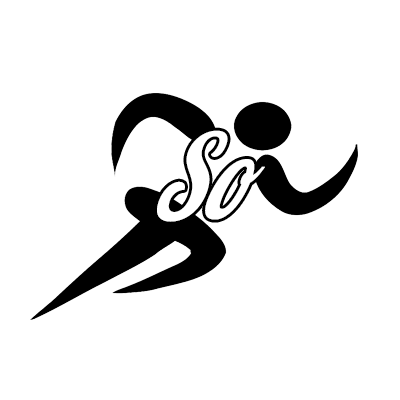
<style>
.page{position:relative;width:400px;height:400px;background:#ffffff}
.page>*{position:absolute;margin:0}
.t1{font:125.3px "Lobster1.4";color:#ffffff;scale:0.72 1}
</style>
<div class="page">
<p class="t1" style="left:157px;top:130px;width:108px;height:92px">So</p>
</div>
